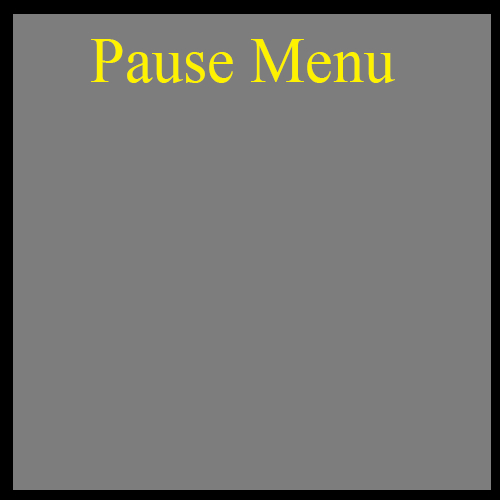
<style>
.page{position:relative;width:500px;height:500px;background:#7d7d7d}
.page>*{position:absolute;margin:0}
.t1{font:65.3px "TimesNewRomanPSMT";color:#fff200;scale:0.95 1}
</style>
<div class="page">
<p class="t1" style="left:91px;top:39px;width:304px;height:44px">Pause Menu</p>
</div>
